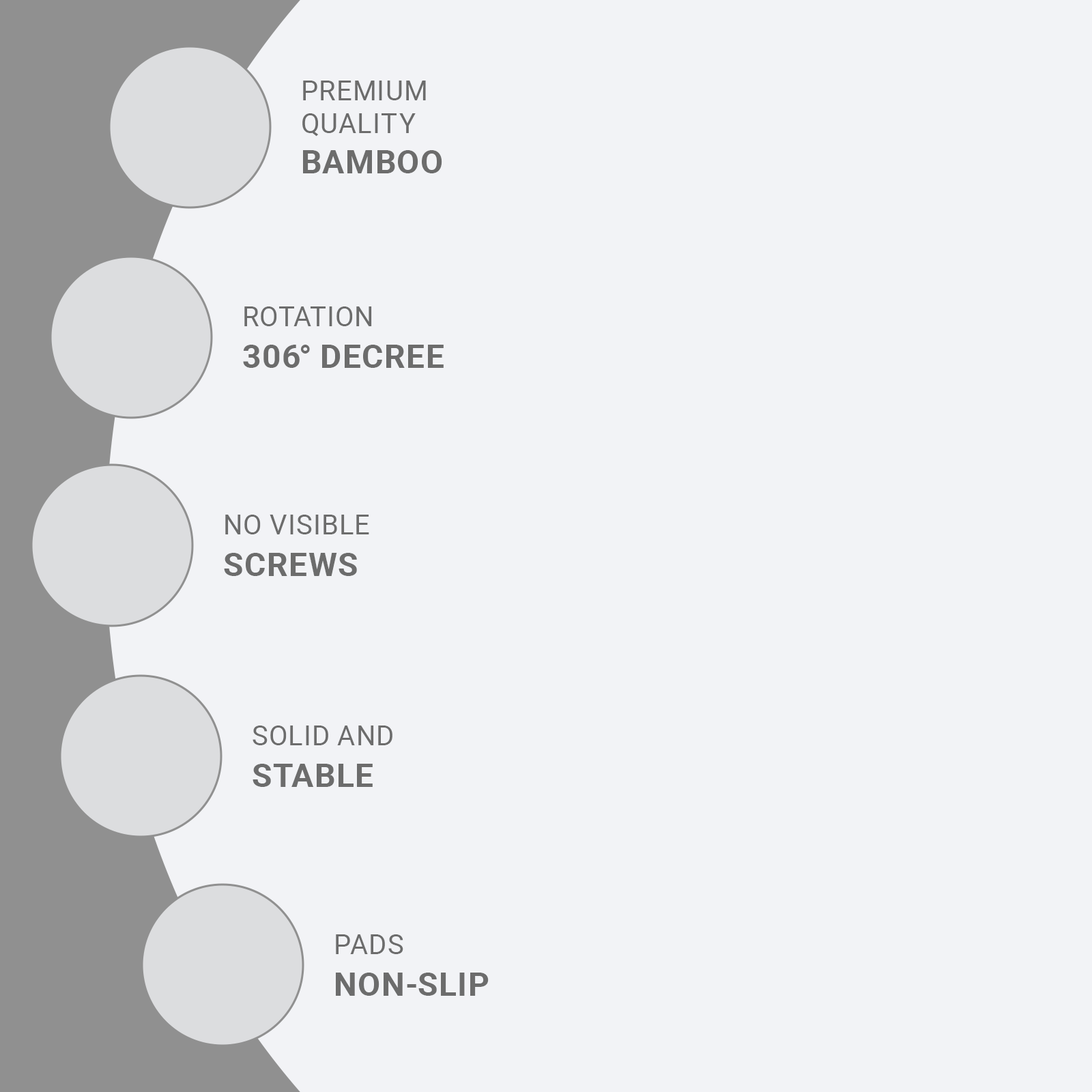
<style>
.page{position:relative;width:1092px;height:1092px;background:#f2f3f6}
.page>*{position:absolute;margin:0}
.t1{font:27.3px "Roboto-Regular";color:#6c6c6c;text-transform:uppercase}
.t2{font:32.8px "Roboto-Bold";color:#6c6c6c;text-transform:uppercase}
</style>
<div class="page">
<p class="t1" style="left:302px;top:81px;width:124px;height:55px">Premium<br>quality</p>
<p class="t2" style="left:303px;top:150px;width:139px;height:23px">Bamboo</p>
<p class="t1" style="left:244px;top:306px;width:128px;height:20px">Rotation</p>
<p class="t2" style="left:243px;top:345px;width:201px;height:23px">306° decree</p>
<p class="t1" style="left:225px;top:515px;width:144px;height:19px">No visible</p>
<p class="t2" style="left:224px;top:553px;width:133px;height:23px">Screws</p>
<p class="t1" style="left:253px;top:725px;width:139px;height:20px">Solid and</p>
<p class="t2" style="left:253px;top:764px;width:120px;height:23px">Stable</p>
<p class="t1" style="left:336px;top:934px;width:67px;height:20px">Pads</p>
<p class="t2" style="left:336px;top:973px;width:153px;height:23px">Non-slip</p>
</div>
